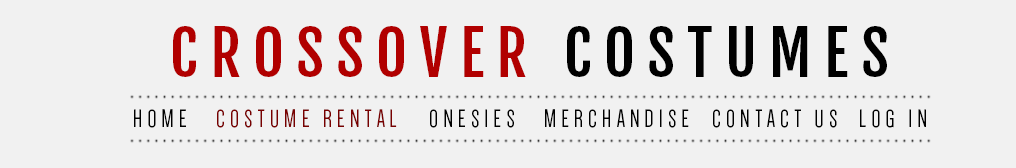
<style>
.page{position:relative;width:1016px;height:168px;background:#f1f1f1}
.page>*{position:absolute;margin:0}
.t1{font:60.6px "FjallaOne";letter-spacing:0.2em;color:#b10000}
.t2{font:60.6px "FjallaOne";letter-spacing:0.2em;color:#000000}
.t3{font:25.8px "Dense-Regular";letter-spacing:0.2em;color:#000000}
.t4{font:25.8px "Dense-Regular";letter-spacing:0.2em;color:#790000}
</style>
<div class="page">
<p class="t1" style="left:173px;top:26px;width:714px;height:51px">CROSSOVER<span class="t2"> COSTUMES</span></p>
<p class="t3" style="left:134px;top:109px;width:52px;height:19px">HOME</p>
<p class="t4" style="left:217px;top:109px;width:180px;height:19px">COSTUME RENTAL</p>
<p class="t3" style="left:430px;top:109px;width:84px;height:19px">ONESIES</p>
<p class="t3" style="left:545px;top:109px;width:144px;height:19px">MERCHANDISE</p>
<p class="t3" style="left:713px;top:109px;width:124px;height:19px">CONTACT US</p>
<p class="t3" style="left:860px;top:109px;width:66px;height:19px">LOG IN</p>
</div>
